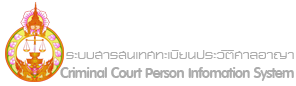
<style>
.page{position:relative;width:296px;height:86px;background:#ffffff}
.page>*{position:absolute;margin:0}
.t1{font:17.5px "PSLNatrinthornSPBold";letter-spacing:0.01em;color:#acacac}
.t2{font:22.5px "PSLOmyim";letter-spacing:-0.05em;color:#acacac}
</style>
<div class="page">
<p class="t1" style="left:66px;top:50px;width:228px;height:9px">ระบบสารสนเทศทะเบียนประวัติศาลอาญา</p>
<p class="t2" style="left:60px;top:67px;width:234px;height:14px">Criminal Court Person Infomation System</p>
</div>
